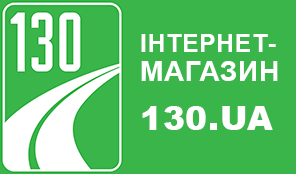
<style>
.page{position:relative;width:296px;height:174px;background:#39b54a}
.page>*{position:absolute;margin:0}
.t1{font:25px/29px "Arial-BoldMT";letter-spacing:0.02em;color:#ffffff;text-transform:uppercase}
.t2{font:28px/29px "Arial-BoldMT";letter-spacing:0.02em;color:#ffffff;text-transform:uppercase}
.t3{font:33px "Arial-Black";letter-spacing:0.02em;color:#ffffff;text-transform:uppercase}
</style>
<div class="page">
<p class="t1" style="left:141px;top:34px;width:137px;height:47px">Інтернет-<br><span class="t2">магазин</span></p>
<p class="t3" style="left:142px;top:106px;width:131px;height:24px">130.ua</p>
</div>
